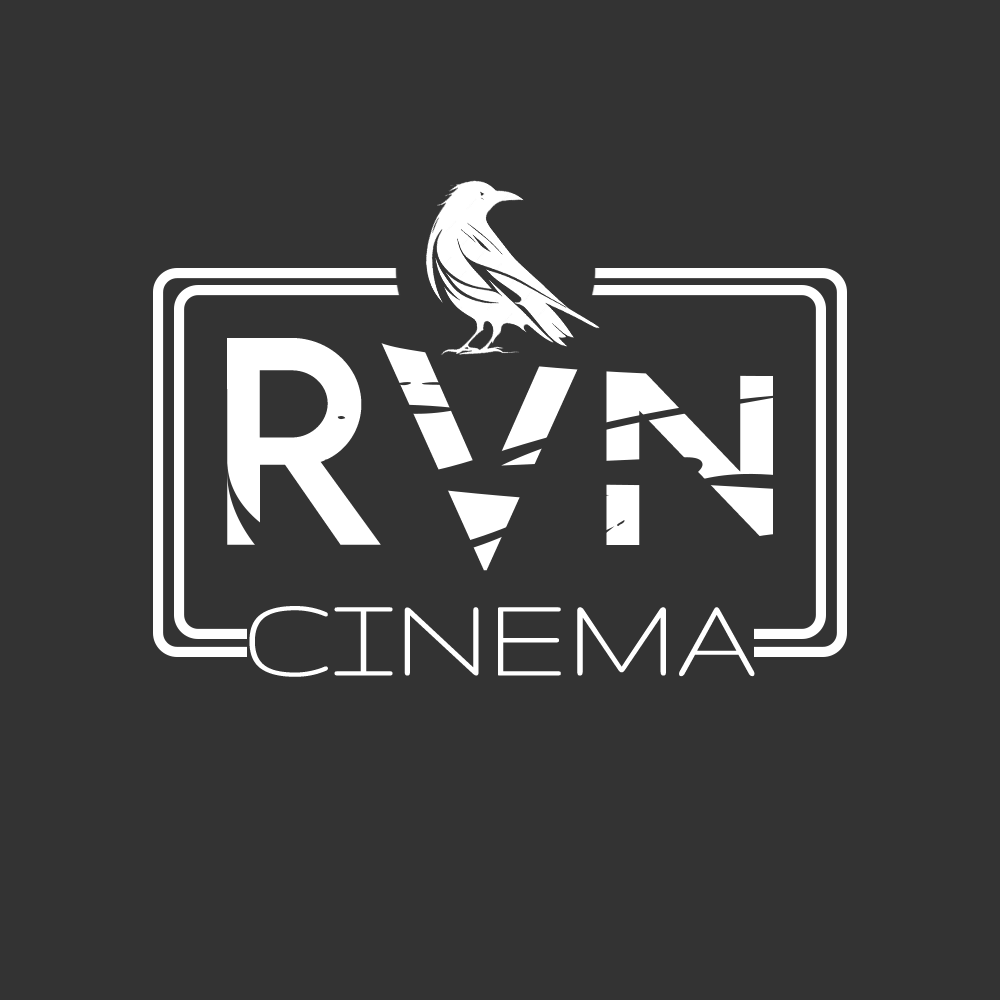
<style>
.page{position:relative;width:1000px;height:1000px;background:#333333}
.page>*{position:absolute;margin:0}
.t1{font:262.5px "LEMONMILK-Regular";letter-spacing:-0.04em;color:#ffffff}
.t2{font:300px "LEMONMILK-Regular";letter-spacing:-0.04em;color:#ffffff}
.t3{font:125px "Gruppo-Regular";color:#ffffff}
</style>
<div class="page">
<p class="t1" style="left:227px;top:329px;width:546px;height:242px">R<span class="t2">V</span>N</p>
<p class="t3" style="left:249px;top:606px;width:506px;height:71px">CINEMA</p>
</div>
